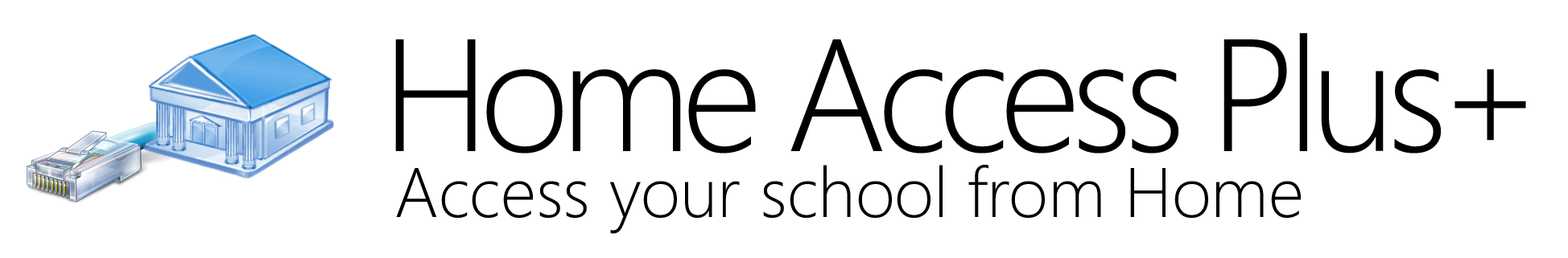
<style>
.page{position:relative;width:1568px;height:258px;background:#ffffff}
.page>*{position:absolute;margin:0}
.t1{font:159.6px "Segoe-Light";letter-spacing:-0.06em;color:#000000}
.t2{font:70px "Segoe-Light";color:#000000}
</style>
<div class="page">
<p class="t1" style="left:395px;top:33px;width:1131px;height:121px">Home Access Plus+</p>
<p class="t2" style="left:396px;top:165px;width:905px;height:69px">Access your school from Home</p>
</div>
